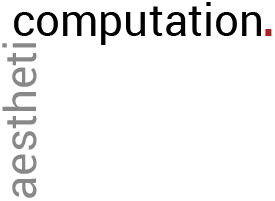
<style>
.page{position:relative;width:275px;height:201px;background:#ffffff}
.page>*{position:absolute;margin:0}
.t1{font:44px "Roboto-Regular";color:#000000}
.t2{font:90px "Roboto-Light";color:#af2020}
.t3{font:44px "Roboto-Regular";color:#888888}
</style>
<div class="page">
<p class="t1" style="left:14px;top:2px;width:247px;height:43px">computation</p>
<p class="t2" style="left:265px;top:29px;width:7px;height:7px">.</p>
<p class="t3" style="left:2px;top:43px;width:35px;height:155px;rotate:-90deg">aestheti</p>
</div>
